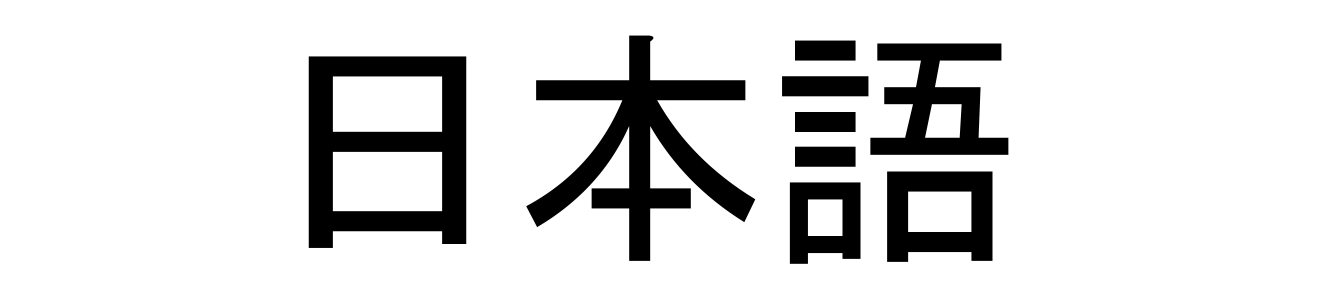
<style>
.page{position:relative;width:1320px;height:300px;background:#ffffff}
.page>*{position:absolute;margin:0}
.t1{font:254px "MS-Gothic";color:#000000}
</style>
<div class="page">
<p class="t1" style="left:308px;top:35px;width:701px;height:229px">日本語</p>
</div>
